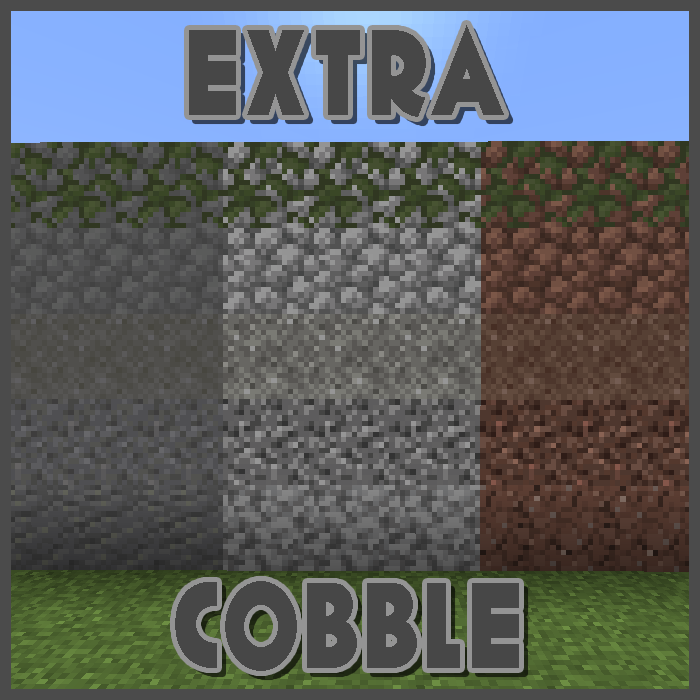
<style>
.page{position:relative;width:700px;height:700px}
.page>*{position:absolute;margin:0}
.t1{font:120px "Geomancy-ExtraBold";letter-spacing:0.05em;color:#474747;scale:0.8 1}
</style>
<div class="page">
<p class="t1" style="left:189px;top:25px;width:315px;height:92px">EXTRA</p>
<p class="t1" style="left:175px;top:581px;width:344px;height:90px">COBBLE</p>
</div>
